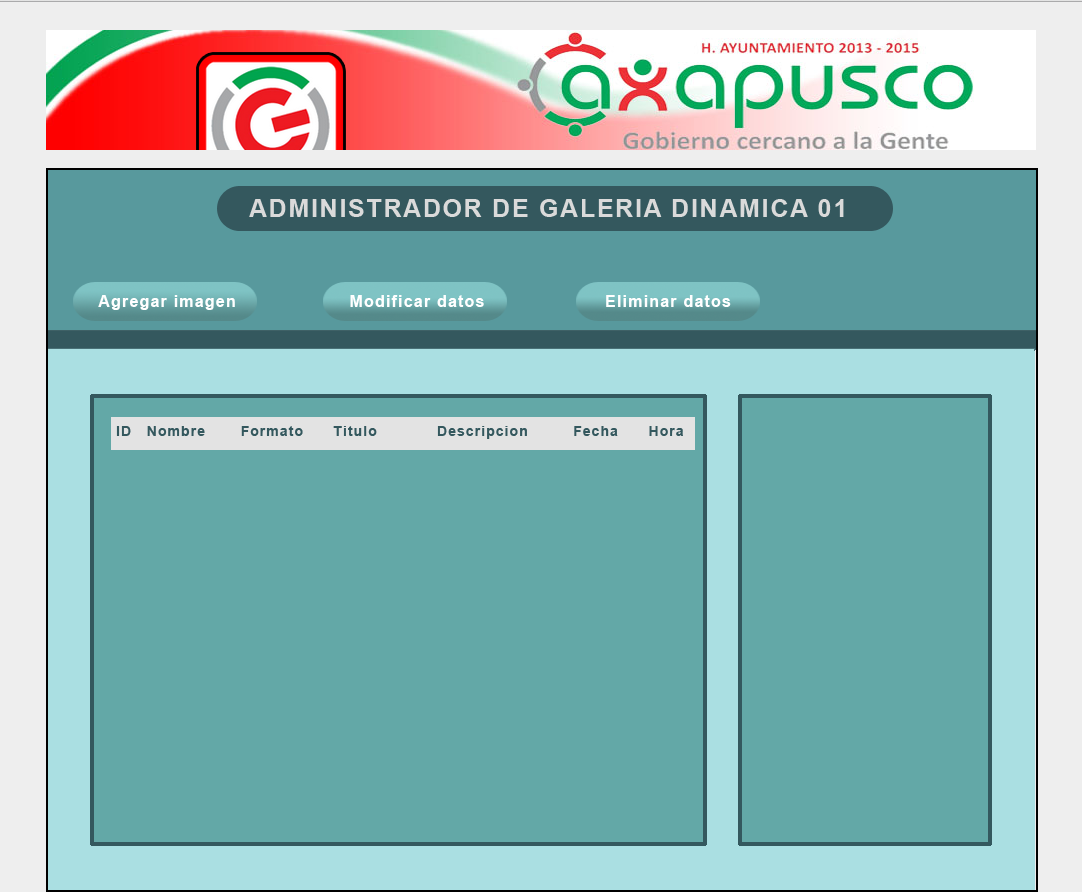
<style>
.page{position:relative;width:1082px;height:892px;background:#63a8a7}
.page>*{position:absolute;margin:0}
.t1{font:24.8px "Arial-BoldMT";letter-spacing:0.075em;color:#dadada}
.t2{font:16px "Arial-BoldMT";letter-spacing:0.075em;color:#ffffff}
.t3{font:14px "Arial-BoldMT";letter-spacing:0.075em;color:#34585e}
</style>
<div class="page">
<p class="t1" style="left:249px;top:199px;width:595px;height:18px">ADMINISTRADOR DE GALERIA DINAMICA 01</p>
<p class="t2" style="left:98px;top:295px;width:137px;height:15px">Agregar imagen</p>
<p class="t2" style="left:350px;top:295px;width:134px;height:12px">Modificar datos</p>
<p class="t2" style="left:606px;top:295px;width:125px;height:12px">Eliminar datos</p>
<p class="t3" style="left:116px;top:426px;width:567px;height:13px">ID   Nombre       Formato      Titulo            Descripcion         Fecha      Hora</p>
</div>
